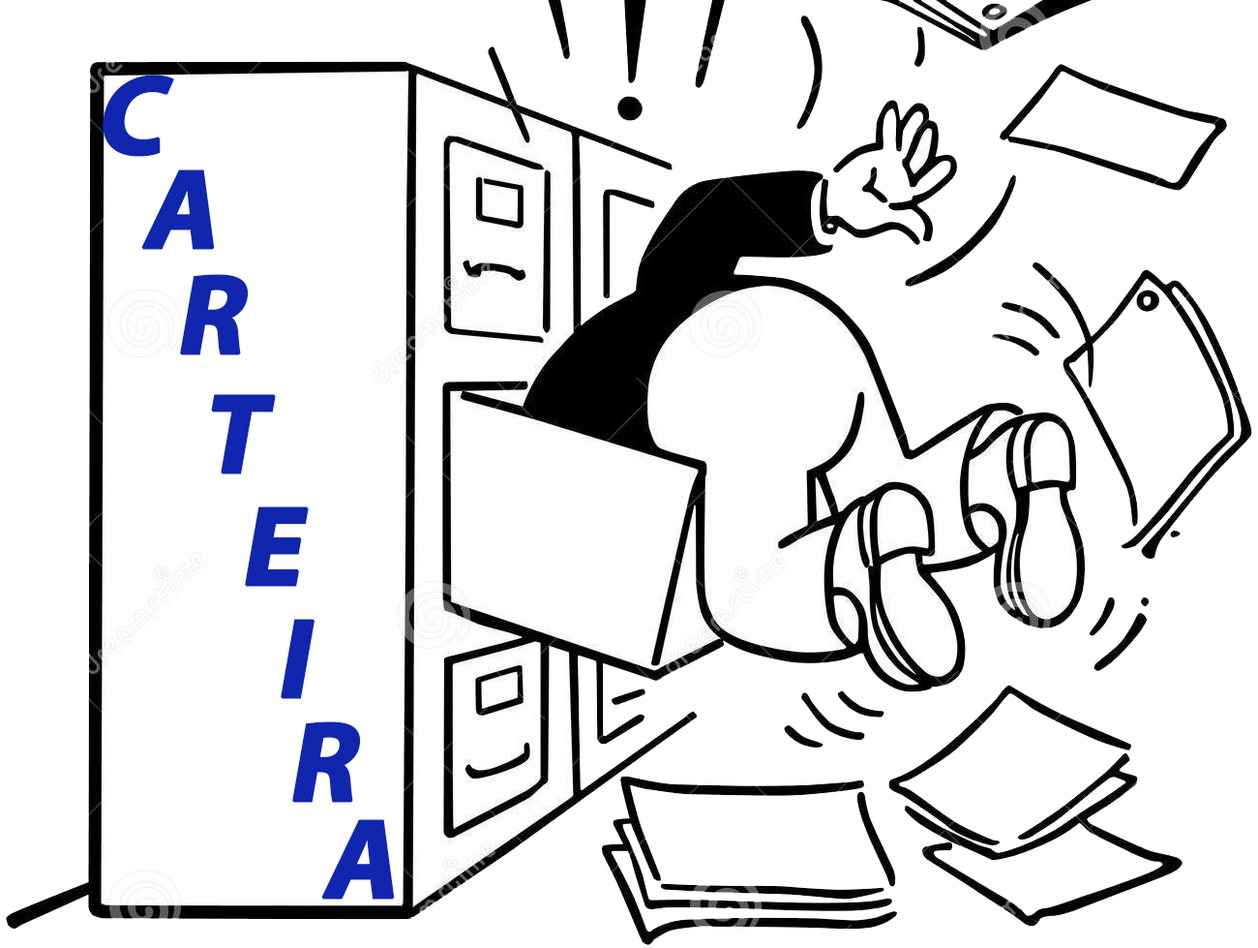
<style>
.page{position:relative;width:1258px;height:948px;background:#ffffff}
.page>*{position:absolute;margin:0}
.t1{font:193.6px "MyriadPro-Bold";color:#1026af;font-weight:bold;font-style:italic}
</style>
<div class="page">
<p class="t1" style="left:103px;top:75px;width:71px;height:82px">C</p>
<p class="t1" style="left:141px;top:169px;width:74px;height:81px">A</p>
<p class="t1" style="left:180px;top:274px;width:69px;height:81px">R</p>
<p class="t1" style="left:211px;top:394px;width:65px;height:80px">T</p>
<p class="t1" style="left:245px;top:506px;width:64px;height:81px">E</p>
<p class="t1" style="left:281px;top:619px;width:35px;height:80px">I</p>
<p class="t1" style="left:292px;top:721px;width:69px;height:81px">R</p>
<p class="t1" style="left:321px;top:819px;width:74px;height:80px">A</p>
</div>
